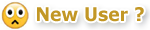
<style>
.page{position:relative;width:150px;height:30px;background:#ffffff}
.page>*{position:absolute;margin:0}
.t1{font:18.7px "Verdana-Bold";color:#c29725;scale:0.92 1}
</style>
<div class="page">
<p class="t1" style="left:37px;top:7px;width:107px;height:15px">New User ?</p>
</div>
